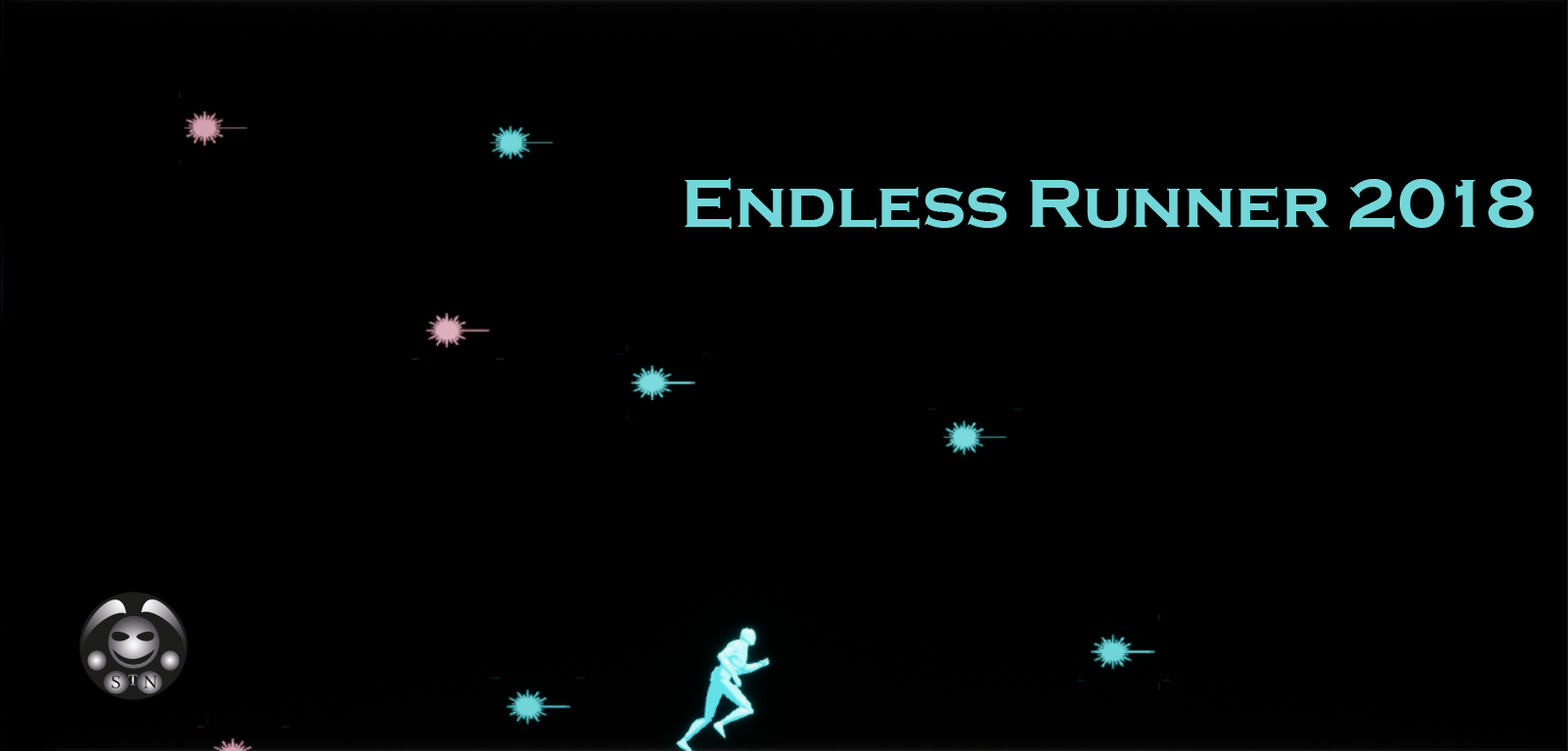
<style>
.page{position:relative;width:1568px;height:751px;background:#000000}
.page>*{position:absolute;margin:0}
.t1{font:70.4px "CopperplateGothic-Bold";color:#73d7d9}
</style>
<div class="page">
<p class="t1" style="left:685px;top:178px;width:849px;height:52px">Endless Runner 2018</p>
</div>
